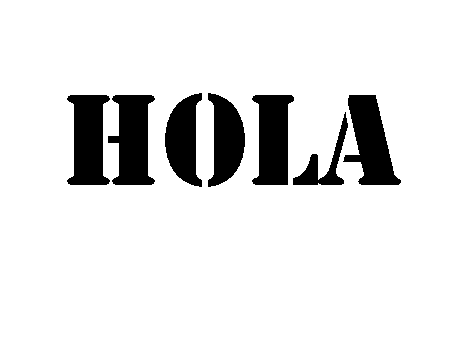
<style>
.page{position:relative;width:454px;height:340px;background:#ffffff}
.page>*{position:absolute;margin:0}
.t1{font:120px "StencilStd";color:#000000}
</style>
<div class="page">
<p class="t1" style="left:67px;top:93px;width:334px;height:94px">HOLA</p>
</div>
